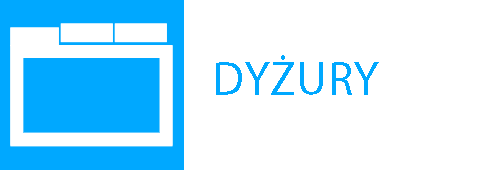
<style>
.page{position:relative;width:484px;height:170px;background:#ffffff}
.page>*{position:absolute;margin:0}
.t1{font:48.3px "MyriadPro-Regular";color:#00a8ff}
</style>
<div class="page">
<p class="t1" style="left:216px;top:55px;width:163px;height:40px">DYŻURY</p>
</div>
